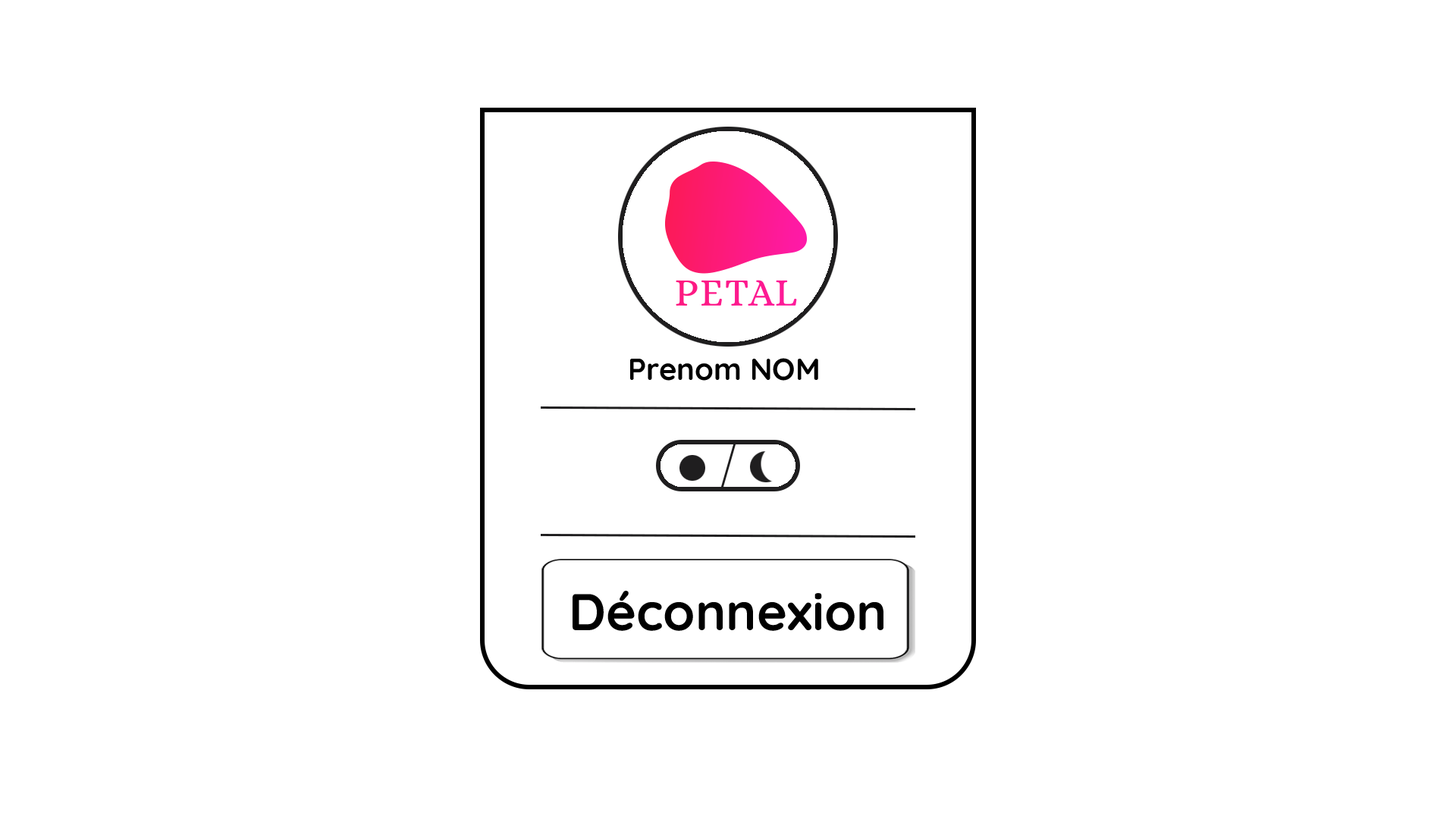
<style>
.page{position:relative;width:1456px;height:819px;background:#ffffff}
.page>*{position:absolute;margin:0}
.t1{font:30.3px "Quicksand-Bold";color:#000000}
.t2{font:51.6px "Quicksand-Bold";color:#000000}
</style>
<div class="page">
<p class="t1" style="left:630px;top:358px;width:188px;height:23px">Prenom NOM</p>
<p class="t2" style="left:573px;top:591px;width:310px;height:40px">Déconnexion</p>
</div>
